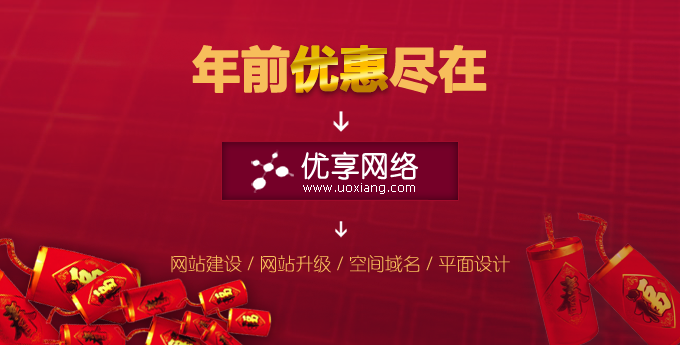
<style>
.page{position:relative;width:680px;height:345px}
.page>*{position:absolute;margin:0}
.t1{font:18px "FZXQJW--GB1-0";color:#f7be5b}
.t2{font:48px "MicrosoftYaHei";color:#f7be5b;font-weight:bold}
.t3{font:48px "MicrosoftYaHei";font-weight:bold}
.t4{font:28.7px "YouYuan";color:#ffffff;font-weight:bold}
.t5{font:12px "Tahoma";letter-spacing:0.068em;color:#ffffff}
</style>
<div class="page">
<p class="t1" style="left:171px;top:45px;width:339px;height:228px;text-align:center"><span class="t2">年前优惠尽在<br><br><br><br></span>网站建设 / 网站升级 / 空间域名 / 平面设计</p>
<p class="t3" style="left:290px;top:45px;width:98px;height:48px">优惠</p>
<p class="t4" style="left:301px;top:151px;width:118px;height:29px">优享网络</p>
<p class="t5" style="left:303px;top:183px;width:112px;height:11px">www.uoxiang.com</p>
</div>
